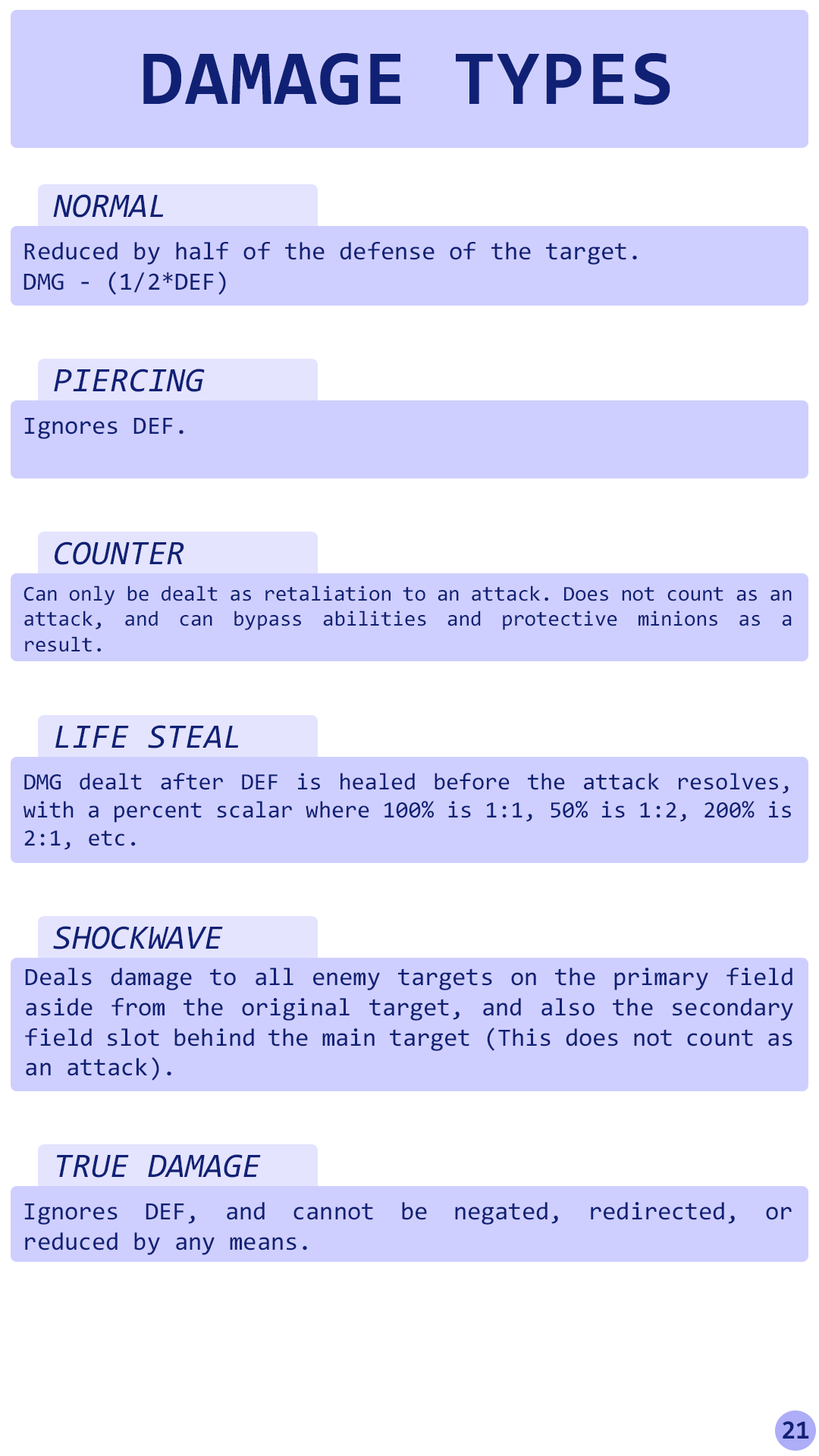
<style>
.page{position:relative;width:819px;height:1456px;background:#ffffff}
.page>*{position:absolute;margin:0}
.t1{font:78.3px "Consolas-Bold";letter-spacing:0.02em;color:#102175}
.t2{font:34.3px "Consolas-Italic";color:#102175}
.t3{font:25px "Consolas";color:#102175}
.t4{font:21.2px "Consolas";color:#102175}
.t5{font:23.5px "Consolas";color:#102175}
.t6{font:26.4px "Consolas-Bold";color:#102175}
</style>
<div class="page">
<p class="t1" style="left:143px;top:53px;width:527px;height:52px">DAMAGE TYPES</p>
<p class="t2" style="left:53px;top:194px;width:111px;height:24px">NORMAL</p>
<p class="t3" style="left:24px;top:242px;width:613px;height:53px;text-align:justify">Reduced by half of the defense of the target. <br>DMG - (1/2*DEF)</p>
<p class="t2" style="left:54px;top:369px;width:151px;height:23px">PIERCING</p>
<p class="t3" style="left:24px;top:418px;width:160px;height:21px">Ignores DEF.</p>
<p class="t2" style="left:55px;top:541px;width:129px;height:24px">COUNTER</p>
<p class="t4" style="left:24px;top:585px;width:768px;height:67px;text-align:justify">Can only be dealt as retaliation to an attack. Does not count as an attack, and can bypass abilities and protective minions as a result.</p>
<p class="t2" style="left:55px;top:725px;width:184px;height:23px">LIFE STEAL</p>
<p class="t5" style="left:24px;top:773px;width:767px;height:77px;text-align:justify">DMG dealt after DEF is healed before the attack resolves, with a percent scalar where 100% is 1:1, 50% is 1:2, 200% is 2:1, etc.</p>
<p class="t2" style="left:53px;top:926px;width:170px;height:23px">SHOCKWAVE</p>
<p class="t3" style="left:25px;top:968px;width:768px;height:113px;text-align:justify">Deals damage to all enemy targets on the primary field aside from the original target, and also the secondary field slot behind the main target (This does not count as an attack).</p>
<p class="t2" style="left:56px;top:1154px;width:205px;height:24px">TRUE DAMAGE</p>
<p class="t3" style="left:24px;top:1202px;width:768px;height:53px;text-align:justify">Ignores DEF, and cannot be negated, redirected, or reduced by any means.</p>
<p class="t6" style="left:783px;top:1421px;width:26px;height:18px">21</p>
</div>
